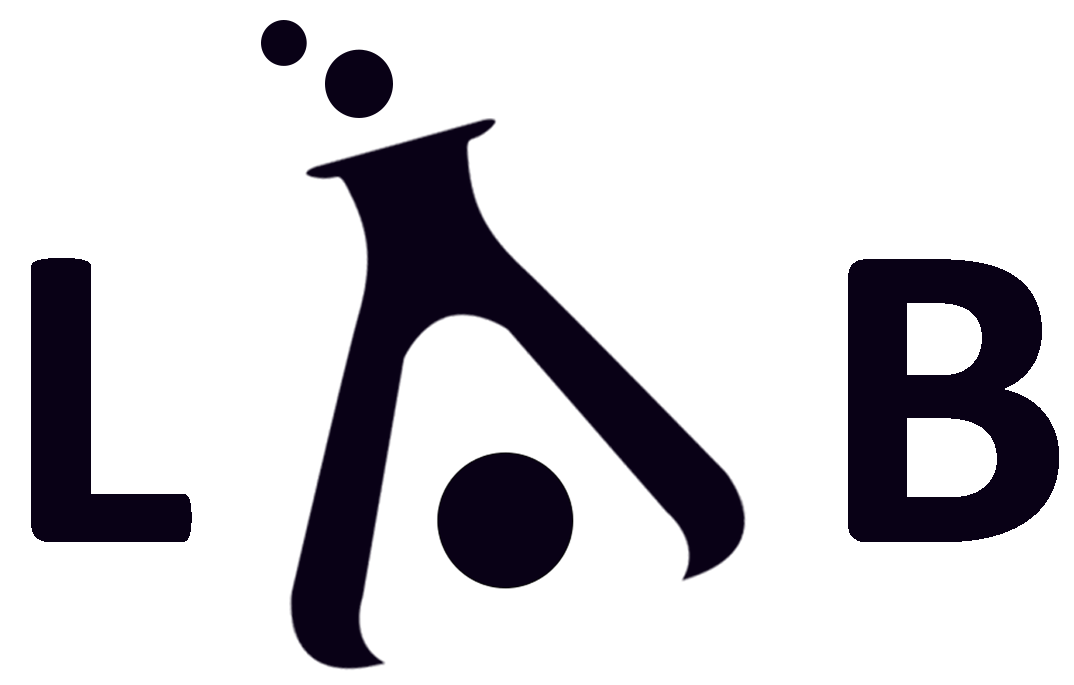
<style>
.page{position:relative;width:1074px;height:685px;background:#ffffff}
.page>*{position:absolute;margin:0}
.t1{font:446.1px "Calibri-Bold";color:#090116}
</style>
<div class="page">
<p class="t1" style="left:31px;top:258px;width:1028px;height:284px">L      B</p>
</div>
